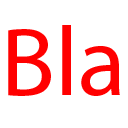
<style>
.page{position:relative;width:128px;height:128px;background:#ffffff}
.page>*{position:absolute;margin:0}
.t1{font:98.4px "MyriadPro-Regular";color:#ff0000}
</style>
<div class="page">
<p class="t1" style="left:8px;top:25px;width:112px;height:71px">Bla</p>
</div>
